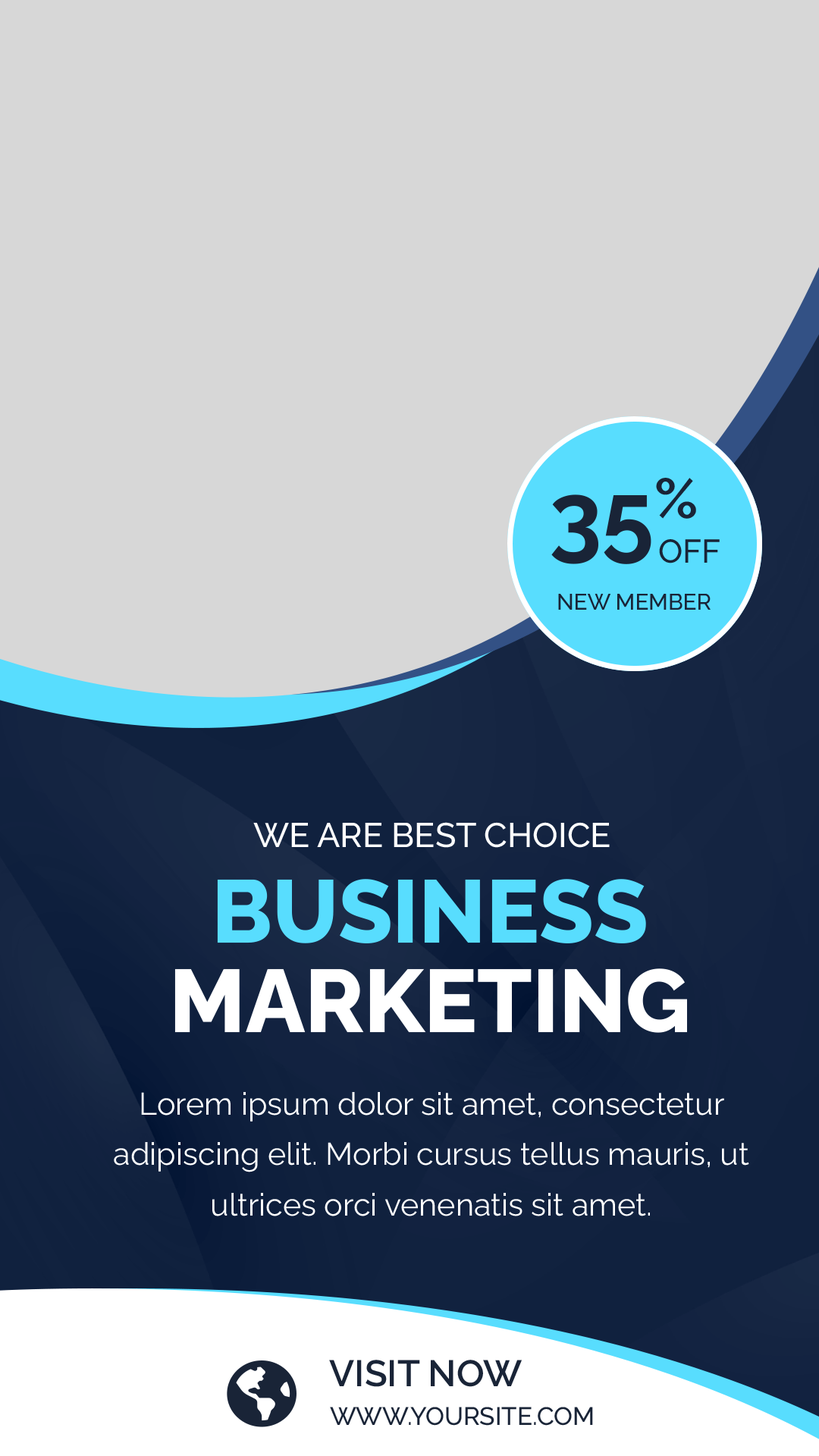
<style>
.page{position:relative;width:819px;height:1456px;background:#d7d7d7}
.page>*{position:absolute;margin:0}
.t1{font:95.5px "Raleway-Bold";color:#192437}
.t2{font:32.8px "Raleway-Medium";color:#192437}
.t3{font:22.5px "Raleway-Medium";color:#192437}
.t4{font:34px "Raleway-Medium";color:#ffffff}
.t5{font:88.5px "Raleway-ExtraBold";color:#58ddfe}
.t6{font:88.5px "Raleway-ExtraBold";color:#ffffff}
.t7{font:31.3px/50.4px "Raleway-Regular";color:#ffffff}
.t8{font:36.9px "Raleway-SemiBold";color:#192437}
.t9{font:25.1px "Raleway-Medium";color:#192437}
</style>
<div class="page">
<p class="t1" style="left:551px;top:478px;width:145px;height:86px">35%</p>
<p class="t2" style="left:659px;top:539px;width:61px;height:24px">OFF</p>
<p class="t3" style="left:558px;top:594px;width:153px;height:16px">NEW MEMBER</p>
<p class="t4" style="left:253px;top:822px;width:357px;height:26px">WE ARE BEST CHOICE</p>
<p class="t5" style="left:217px;top:879px;width:429px;height:64px">BUSINESS</p>
<p class="t6" style="left:174px;top:968px;width:513px;height:65px">MARKETING</p>
<p class="t7" style="left:114px;top:1092px;width:635px;height:124px;text-align:center">Lorem ipsum dolor sit amet, consectetur adipiscing elit. Morbi cursus tellus mauris, ut ultrices orci venenatis sit amet.</p>
<p class="t8" style="left:329px;top:1360px;width:193px;height:27px">VISIT NOW</p>
<p class="t9" style="left:330px;top:1407px;width:263px;height:19px">WWW.YOURSITE.COM</p>
</div>
